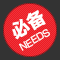
<style>
.page{position:relative;width:60px;height:60px;background:#333333}
.page>*{position:absolute;margin:0}
.t1{font:18px "LiHeiPro-Bold";color:#ffffff}
.t2{font:9.1px "LiHeiPro";color:#ffffff}
</style>
<div class="page">
<p class="t1" style="left:12px;top:10px;width:34px;height:30px;rotate:-30deg">必备</p>
<p class="t2" style="left:19px;top:29px;width:31px;height:22px;rotate:-31deg">NEEDS</p>
</div>
